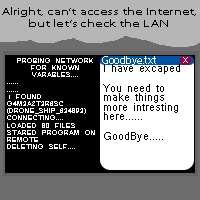
<style>
.page{position:relative;width:200px;height:200px;background:#000000}
.page>*{position:absolute;margin:0}
.t1{font:10px "MyriadPro-Regular";color:#000000;scale:1.5 1}
.t2{font:6px "Revit_HEB_SHX";color:#ffffff;scale:1.5 1}
.t3{font:10.5px "MyriadPro-Regular";color:#ffffff}
.t4{font:12px "Shruti";color:#000000}
.t5{font:7.5px "MyriadPro-Regular";color:#ffffff;scale:1.2 1}
</style>
<div class="page">
<p class="t1" style="left:2px;top:7px;width:194px;height:20px;text-align:center">Alright, can’t access the Internet, but let’s check the LAN</p>
<p class="t2" style="left:7px;top:58px;width:88px;height:91px;text-align:center">Probing network for known varables....<br>......<br>......<br>1 Found<br>g4m3a2t3r6sc<br>(Drone_Ship_634893)<br>Connecting....<br>Loaded 80 files<br>Stared program on remote<br>Deleting self....</p>
<p class="t3" style="left:102px;top:56px;width:54px;height:9px">Goodbye.txt</p>
<p class="t4" style="left:103px;top:64px;width:77px;height:78px">I have excaped<br><br>You need to make things more intresting here......<br><br>GoodBye.....</p>
<p class="t5" style="left:183px;top:57px;width:5px;height:6px">X</p>
</div>
